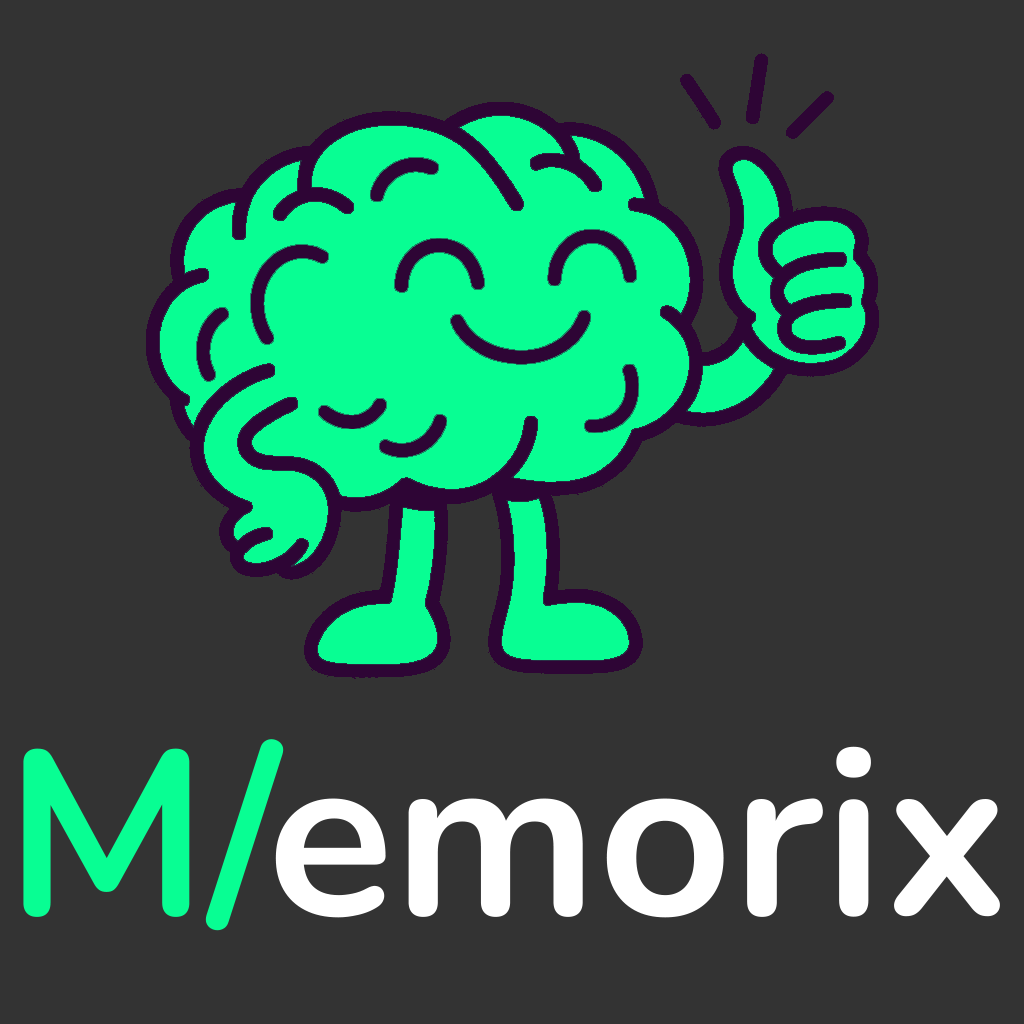
<style>
.page{position:relative;width:1024px;height:1024px;background:#333333}
.page>*{position:absolute;margin:0}
.t1{font:233.3px "Nunito-Bold";color:#ffffff}
.t2{font:233.3px "Nunito-Bold";color:#08fe93}
</style>
<div class="page">
<p class="t1" style="left:23px;top:739px;width:977px;height:192px"><span class="t2">M/</span>emorix</p>
</div>
